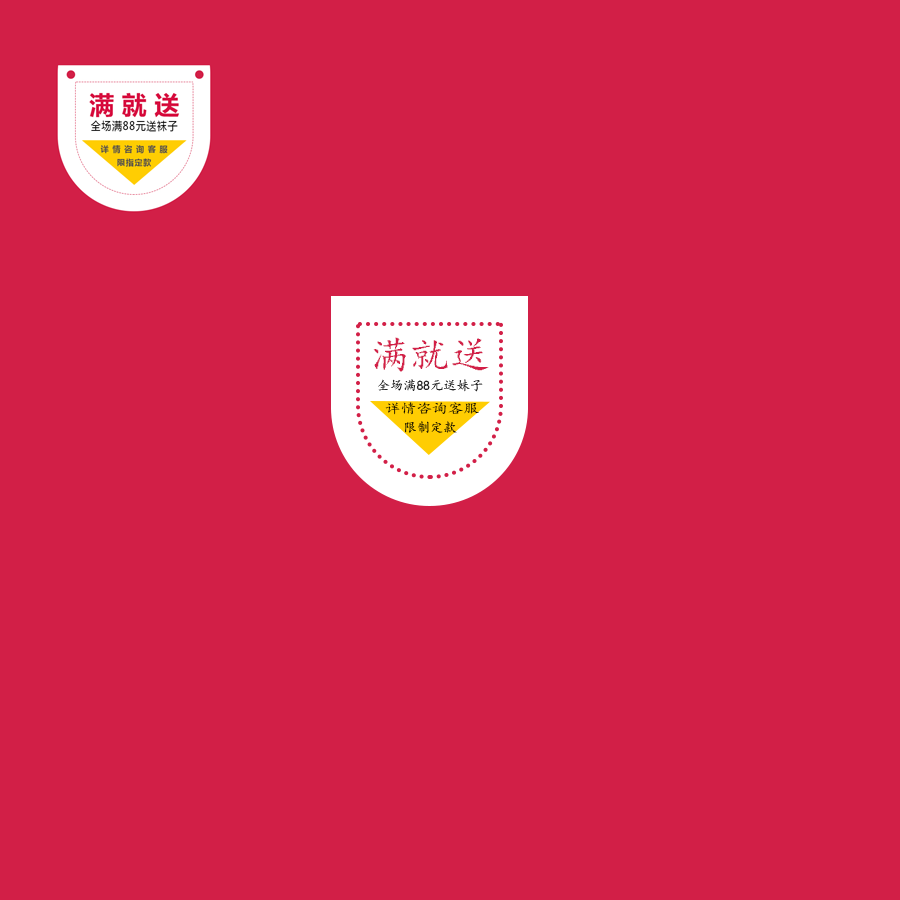
<style>
.page{position:relative;width:900px;height:900px;background:#d21f47}
.page>*{position:absolute;margin:0}
.t1{font:40px "¿¬Ìå";color:#d21f47}
.t2{font:13.3px "¿¬Ìå";color:#000000}
.t3{font:13.3px "¿¬Ìå";color:#000000;scale:1.19 1}
.t4{font:13.3px "¿¬Ìå"}
</style>
<div class="page">
<p class="t1" style="left:373px;top:337px;width:116px;height:35px">满就送</p>
<p class="t2" style="left:378px;top:379px;width:105px;height:13px">全场满88元送妹子</p>
<p class="t3" style="left:385px;top:402px;width:94px;height:13px">详情咨询客服</p>
<p class="t4" style="left:404px;top:421px;width:53px;height:12px">限制定款</p>
</div>
